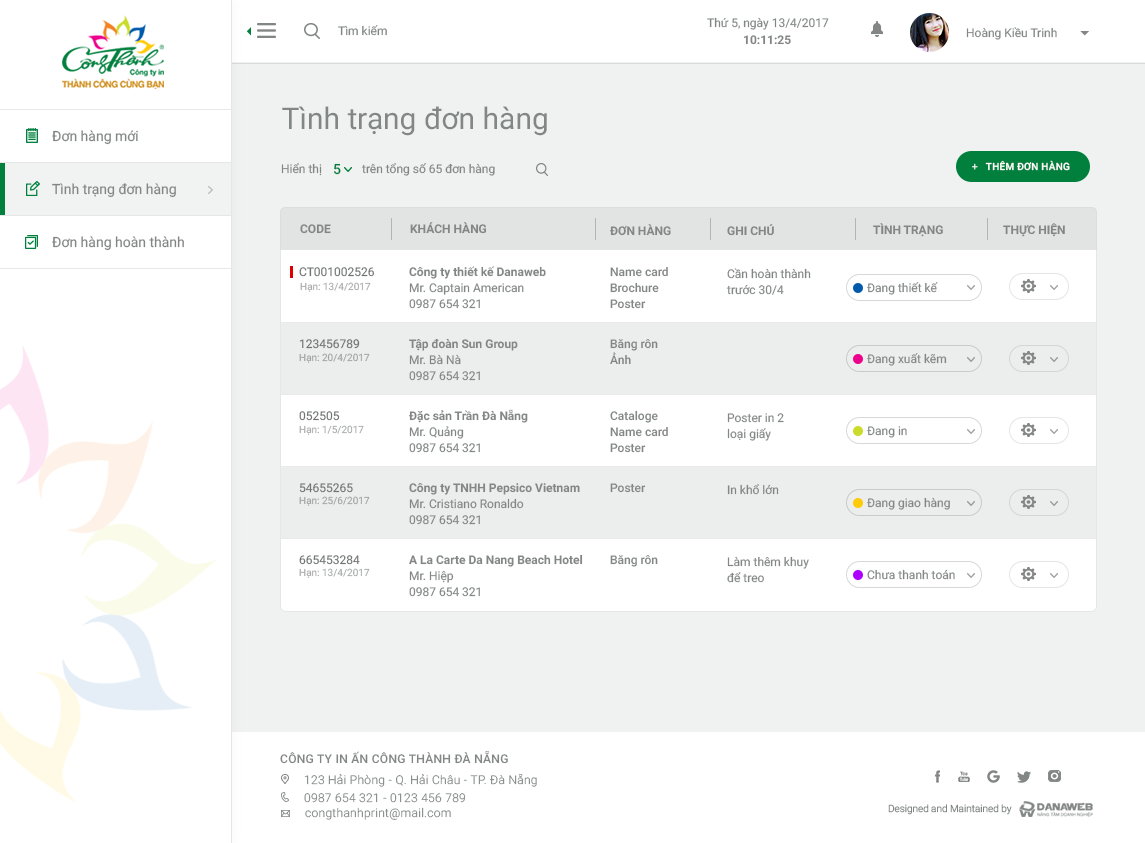
<style>
.page{position:relative;width:1145px;height:843px;background:#ffffff}
.page>*{position:absolute;margin:0}
.t1{font:12px "Roboto-Regular";color:#828785}
.t2{font:12px "Roboto-Bold";color:#828785}
.t3{font:30px "Roboto-Regular";color:#828785}
.t4{font:14px "Roboto-Regular";color:#828785}
.t5{font:10px "Roboto-Medium";letter-spacing:0.025em;color:#ffffff}
.t6{font:10px "Roboto-Light";letter-spacing:0.025em;color:#ffffff}
.t7{font:12px "Roboto-Regular";color:#6f7472}
.t8{font:14px "Roboto-Medium";color:#007f3d}
.t9{font:12px "Roboto-Bold";color:#6f7472}
.t10{font:12px "Roboto-Bold";color:#717372}
.t11{font:12px/16px "Roboto-Regular";color:#6f7472}
.t12{font:12px/16px "Roboto-Bold";color:#6f7472}
.t13{font:12px/16px "Roboto-Medium";color:#6f7472}
.t14{font:12px/16px "Roboto-Regular";color:#828785}
.t15{font:10px "Roboto-Regular";color:#aaacab}
.t16{font:10px "Roboto-Regular";color:#a1a4a3}
.t17{font:12px "Roboto-Medium";color:#6f7472}
.t18{font:12px "Roboto-Medium";letter-spacing:0.025em;color:#6f7472}
.t19{font:12px "Roboto-Light";letter-spacing:0.025em}
.t20{font:10px "Roboto-Light";color:#868786}
</style>
<div class="page">
<p class="t1" style="left:707px;top:17px;width:122px;height:13px">Thứ 5, ngày 13/4/2017</p>
<p class="t1" style="left:338px;top:25px;width:49px;height:11px">Tìm kiếm</p>
<p class="t1" style="left:966px;top:27px;width:91px;height:13px">Hoàng Kiều Trinh</p>
<p class="t2" style="left:743px;top:35px;width:48px;height:10px">10:11:25</p>
<p class="t3" style="left:282px;top:106px;width:265px;height:30px">Tình trạng đơn hàng</p>
<p class="t4" style="left:52px;top:130px;width:86px;height:15px">Đơn hàng mới</p>
<p class="t5" style="left:972px;top:160px;width:98px;height:11px"><span class="t6">+</span>   THÊM ĐƠN HÀNG</p>
<p class="t7" style="left:281px;top:162px;width:41px;height:14px">Hiển thị</p>
<p class="t8" style="left:334px;top:163px;width:7px;height:12px">5</p>
<p class="t1" style="left:361px;top:162px;width:134px;height:14px">trên tổng số 65 đơn hàng</p>
<p class="t4" style="left:52px;top:183px;width:124px;height:15px">Tình trạng đơn hàng</p>
<p class="t9" style="left:410px;top:222px;width:77px;height:12px">KHÁCH HÀNG</p>
<p class="t9" style="left:300px;top:224px;width:31px;height:10px">CODE</p>
<p class="t10" style="left:610px;top:224px;width:61px;height:12px">ĐƠN HÀNG</p>
<p class="t10" style="left:727px;top:224px;width:47px;height:12px">GHI CHÚ</p>
<p class="t10" style="left:873px;top:223px;width:70px;height:14px">TÌNH TRẠNG</p>
<p class="t10" style="left:1003px;top:223px;width:62px;height:14px">THỰC HIỆN</p>
<p class="t4" style="left:52px;top:236px;width:132px;height:15px">Đơn hàng hoàn thành</p>
<p class="t7" style="left:299px;top:267px;width:76px;height:10px">CT001002526</p>
<p class="t11" style="left:409px;top:266px;width:137px;height:43px"><span class="t12">Công ty thiết kế Danaweb<br></span>Mr. Captain American <br>0987 654 321</p>
<p class="t13" style="left:610px;top:267px;width:58px;height:42px">Name card<br>Brochure<br>Poster</p>
<p class="t14" style="left:726px;top:268px;width:85px;height:27px">Cần hoàn thành<br>trước 30/4</p>
<p class="t15" style="left:300px;top:282px;width:71px;height:10px">Hạn: 13/4/2017</p>
<p class="t1" style="left:867px;top:282px;width:71px;height:13px">Đang thiết kế</p>
<p class="t7" style="left:299px;top:339px;width:61px;height:10px">123456789</p>
<p class="t11" style="left:409px;top:338px;width:109px;height:43px"><span class="t12">Tập đoàn Sun Group<br></span>Mr. Bà Nà<br>0987 654 321</p>
<p class="t13" style="left:610px;top:339px;width:48px;height:26px">Băng rôn<br>Ảnh</p>
<p class="t16" style="left:299px;top:353px;width:71px;height:10px">Hạn: 20/4/2017</p>
<p class="t1" style="left:867px;top:353px;width:80px;height:13px">Đang xuất kẽm</p>
<p class="t7" style="left:299px;top:411px;width:41px;height:10px">052505</p>
<p class="t11" style="left:409px;top:409px;width:119px;height:44px"><span class="t12">Đặc sản Trần Đà Nẵng<br></span>Mr. Quảng <br>0987 654 321</p>
<p class="t13" style="left:610px;top:410px;width:58px;height:43px">Cataloge<br>Name card<br>Poster</p>
<p class="t14" style="left:727px;top:413px;width:57px;height:28px">Poster in 2<br>loại giấy</p>
<p class="t15" style="left:299px;top:425px;width:65px;height:10px">Hạn: 1/5/2017</p>
<p class="t1" style="left:867px;top:426px;width:40px;height:12px">Đang in</p>
<p class="t7" style="left:299px;top:483px;width:54px;height:10px">54655265</p>
<p class="t11" style="left:409px;top:483px;width:171px;height:42px"><span class="t12">Công ty TNHH Pepsico Vietnam<br></span>Mr. Cristiano Ronaldo <br>0987 654 321</p>
<p class="t17" style="left:610px;top:483px;width:36px;height:10px">Poster</p>
<p class="t7" style="left:727px;top:483px;width:52px;height:12px">In khổ lớn</p>
<p class="t16" style="left:299px;top:496px;width:71px;height:10px">Hạn: 25/6/2017</p>
<p class="t1" style="left:867px;top:497px;width:83px;height:13px">Đang giao hàng</p>
<p class="t7" style="left:299px;top:555px;width:61px;height:10px">665453284</p>
<p class="t12" style="left:409px;top:554px;width:174px;height:43px">A La Carte Da Nang Beach Hotel<br><span class="t11">Mr. Hiệp <br>0987 654 321</span></p>
<p class="t17" style="left:610px;top:555px;width:48px;height:12px">Băng rôn</p>
<p class="t14" style="left:727px;top:556px;width:82px;height:27px">Làm thêm khuy<br>để treo</p>
<p class="t15" style="left:299px;top:568px;width:71px;height:10px">Hạn: 13/4/2017</p>
<p class="t1" style="left:867px;top:569px;width:88px;height:11px">Chưa thanh toán</p>
<p class="t18" style="left:280px;top:751px;width:228px;height:13px">CÔNG TY IN ẤN CÔNG THÀNH ĐÀ NẴNG</p>
<p class="t19" style="left:304px;top:773px;width:233px;height:14px">123 Hải Phòng - Q. Hải Châu - TP. Đà Nẵng</p>
<p class="t19" style="left:304px;top:793px;width:162px;height:10px">0987 654 321 - 0123 456 789</p>
<p class="t19" style="left:305px;top:807px;width:146px;height:13px">congthanhprint@mail.com</p>
<p class="t20" style="left:888px;top:804px;width:124px;height:11px">Designed and Maintained by</p>
</div>
